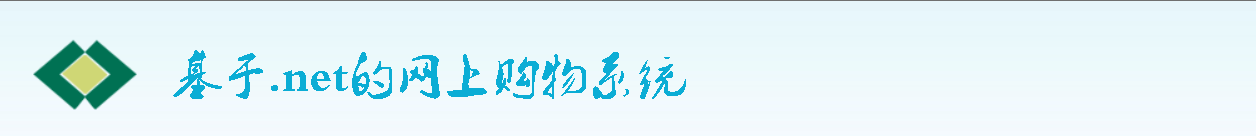
<style>
.page{position:relative;width:1256px;height:136px}
.page>*{position:absolute;margin:0}
.t1{font:48px "2.0-";color:#0badd5}
</style>
<div class="page">
<p class="t1" style="left:173px;top:50px;width:513px;height:49px">基于.net的网上购物系统</p>
</div>
